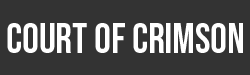
<style>
.page{position:relative;width:250px;height:75px;background:#333333}
.page>*{position:absolute;margin:0}
.t1{font:41.7px "BebasNeue-Regular";color:#ffffff}
</style>
<div class="page">
<p class="t1" style="left:7px;top:23px;width:236px;height:30px">court of crimson</p>
</div>
